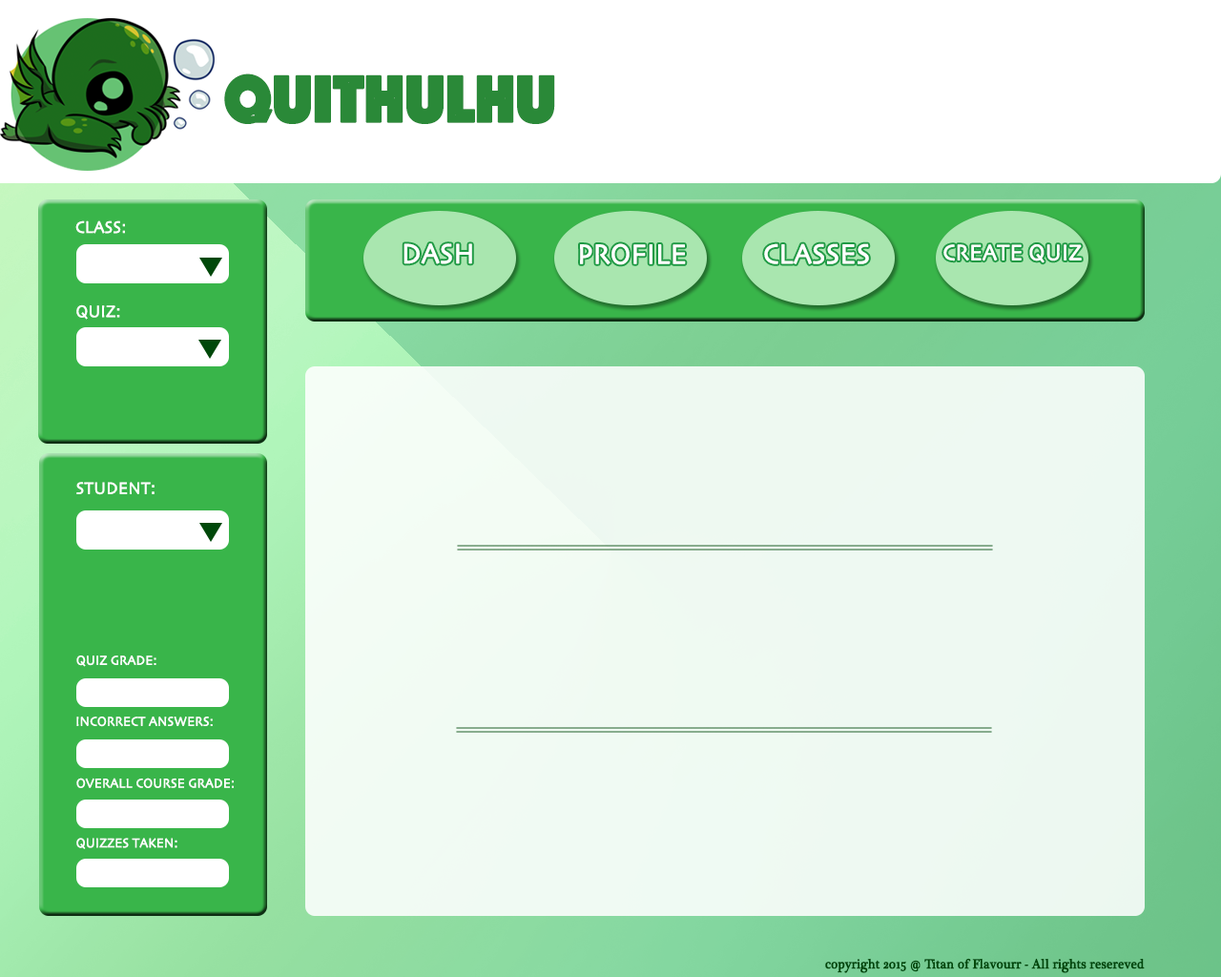
<style>
.page{position:relative;width:1221px;height:977px}
.page>*{position:absolute;margin:0}
.t1{font:68.7px "Phosphate-Inline";letter-spacing:-0.007em;color:#2a8938;font-weight:bold;scale:0.93 1}
.t2{font:17.2px "Skia-Regular";letter-spacing:-0.007em;color:#ffffff;font-weight:bold;scale:0.93 1}
.t3{font:28.6px "Skia-Regular";letter-spacing:-0.007em;color:#ffffff;font-weight:bold;scale:0.93 1}
.t4{font:22.9px "Skia-Regular";letter-spacing:-0.007em;color:#ffffff;font-weight:bold;scale:0.93 1}
.t5{font:13.4px "Skia-Regular";letter-spacing:-0.007em;color:#ffffff;font-weight:bold;scale:0.93 1}
.t6{font:13.4px "PlantagenetCherokee";letter-spacing:-0.007em;color:#00470a;font-weight:bold;scale:0.93 1}
</style>
<div class="page">
<p class="t1" style="left:224px;top:73px;width:331px;height:51px">QUITHULHU</p>
<p class="t2" style="left:75px;top:220px;width:50px;height:14px">CLASS:</p>
<p class="t3" style="left:403px;top:243px;width:69px;height:21px">DASH</p>
<p class="t3" style="left:580px;top:243px;width:106px;height:22px">PROFILE</p>
<p class="t3" style="left:764px;top:243px;width:105px;height:21px">CLASSES</p>
<p class="t4" style="left:943px;top:244px;width:139px;height:19px">CREATE QUIZ</p>
<p class="t2" style="left:76px;top:304px;width:44px;height:16px">QUIZ:</p>
<p class="t2" style="left:76px;top:482px;width:79px;height:13px">STUDENT:</p>
<p class="t5" style="left:76px;top:655px;width:80px;height:12px">QUIZ GRADE:</p>
<p class="t5" style="left:76px;top:716px;width:137px;height:11px">INCORRECT ANSWERS:</p>
<p class="t5" style="left:76px;top:777px;width:158px;height:11px">OVERALL COURSE GRADE:</p>
<p class="t5" style="left:76px;top:837px;width:101px;height:12px">QUIZZES TAKEN:</p>
<p class="t6" style="left:825px;top:958px;width:320px;height:15px">copyright 2015 @ Titan of Flavourr - All rights resereved</p>
</div>
